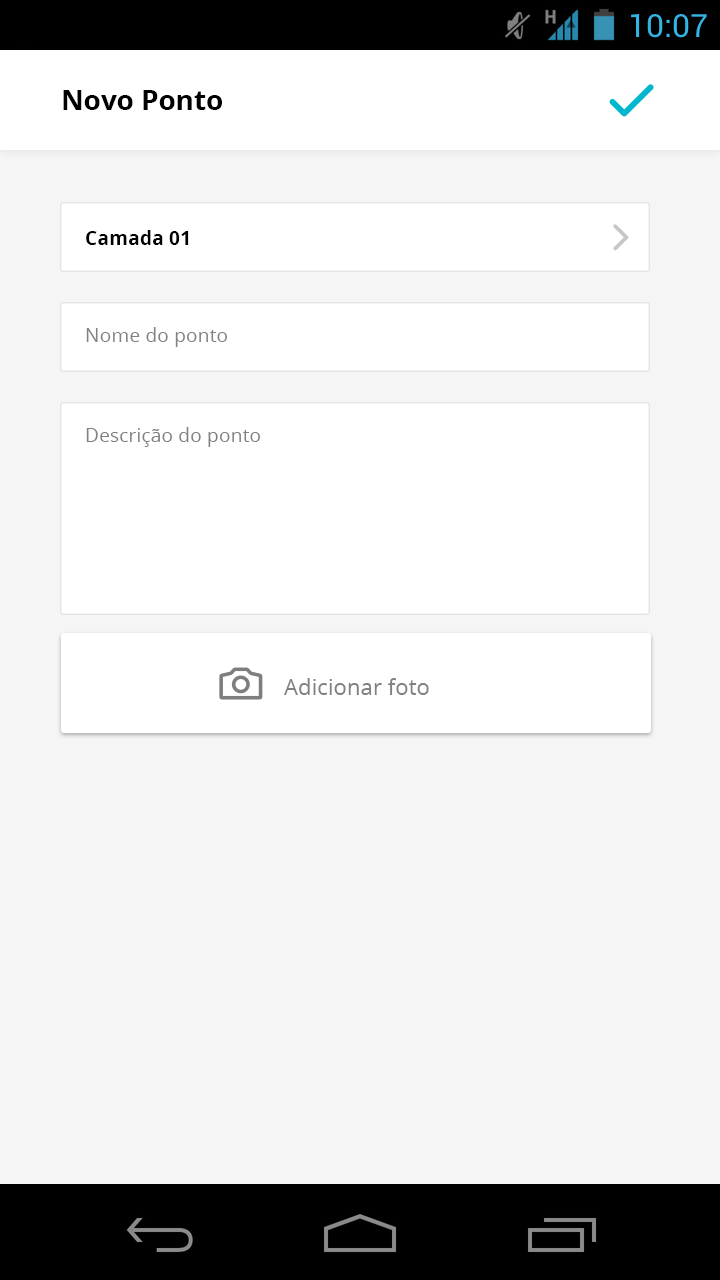
<style>
.page{position:relative;width:720px;height:1280px;background:#f5f5f5}
.page>*{position:absolute;margin:0}
.t1{font:27.8px "OpenSans-Bold";color:#000000}
.t2{font:19.4px "OpenSans-Bold";color:#000000}
.t3{font:19.4px "OpenSans";color:#818181}
.t4{font:22.2px "OpenSans";color:#818181}
</style>
<div class="page">
<p class="t1" style="left:63px;top:90px;width:159px;height:20px">Novo Ponto</p>
<p class="t2" style="left:86px;top:230px;width:103px;height:15px">Camada 01</p>
<p class="t3" style="left:86px;top:327px;width:141px;height:20px">Nome do ponto</p>
<p class="t3" style="left:86px;top:427px;width:174px;height:20px">Descrição do ponto</p>
<p class="t4" style="left:284px;top:678px;width:145px;height:17px">Adicionar foto</p>
</div>
